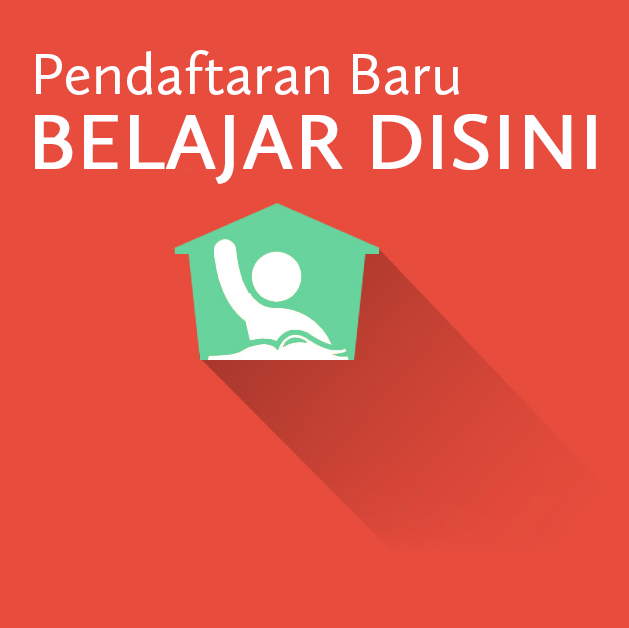
<style>
.page{position:relative;width:629px;height:628px;background:#e84c3d}
.page>*{position:absolute;margin:0}
.t1{font:60px "CallunaSans-Regular";color:#fefdff}
.t2{font:80.1px "CallunaSans-Regular";color:#fefdff;font-weight:bold}
</style>
<div class="page">
<p class="t1" style="left:36px;top:50px;width:423px;height:45px">Pendaftaran Baru</p>
<p class="t2" style="left:35px;top:114px;width:561px;height:70px">BELAJAR DISINI</p>
</div>
